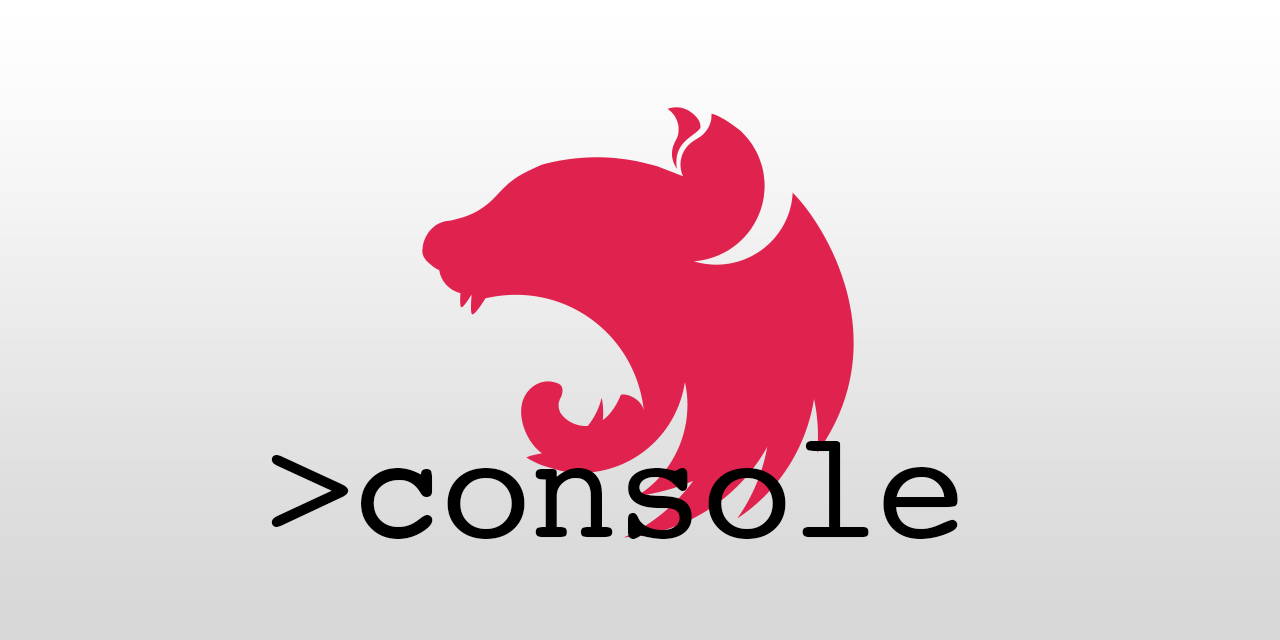
<style>
.page{position:relative;width:1280px;height:640px}
.page>*{position:absolute;margin:0}
.t1{font:150px "Courier";letter-spacing:-0.02em;color:#000000}
</style>
<div class="page">
<p class="t1" style="left:271px;top:441px;width:687px;height:98px">&gt;console</p>
</div>
